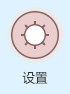
<style>
.page{position:relative;width:70px;height:94px;background:#def2ff}
.page>*{position:absolute;margin:0}
.t1{font:13px "MicrosoftYaHei";color:#323232}
</style>
<div class="page">
<p class="t1" style="left:22px;top:71px;width:26px;height:13px">设置</p>
</div>
